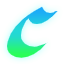
<style>
.page{position:relative;width:64px;height:64px;background:#ffffff}
.page>*{position:absolute;margin:0}
.t1{font:60px "FloranteatLauraItalic"}
</style>
<div class="page">
<p class="t1" style="left:7px;top:6px;width:51px;height:52px">C</p>
</div>
